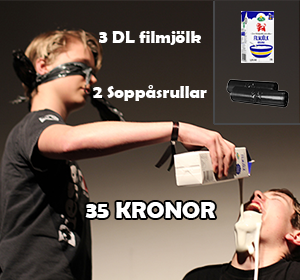
<style>
.page{position:relative;width:300px;height:280px}
.page>*{position:absolute;margin:0}
.t1{font:18px "BerlinSansFBDemi-Bold";color:#ffffff}
.t2{font:24px "BerlinSansFBDemi-Bold";color:#ffffff}
</style>
<div class="page">
<p class="t1" style="left:99px;top:31px;width:102px;height:14px">3 DL filmjölk</p>
<p class="t1" style="left:93px;top:85px;width:114px;height:16px">2 Soppåsrullar</p>
<p class="t2" style="left:85px;top:202px;width:130px;height:16px">35 KRONOR</p>
</div>
